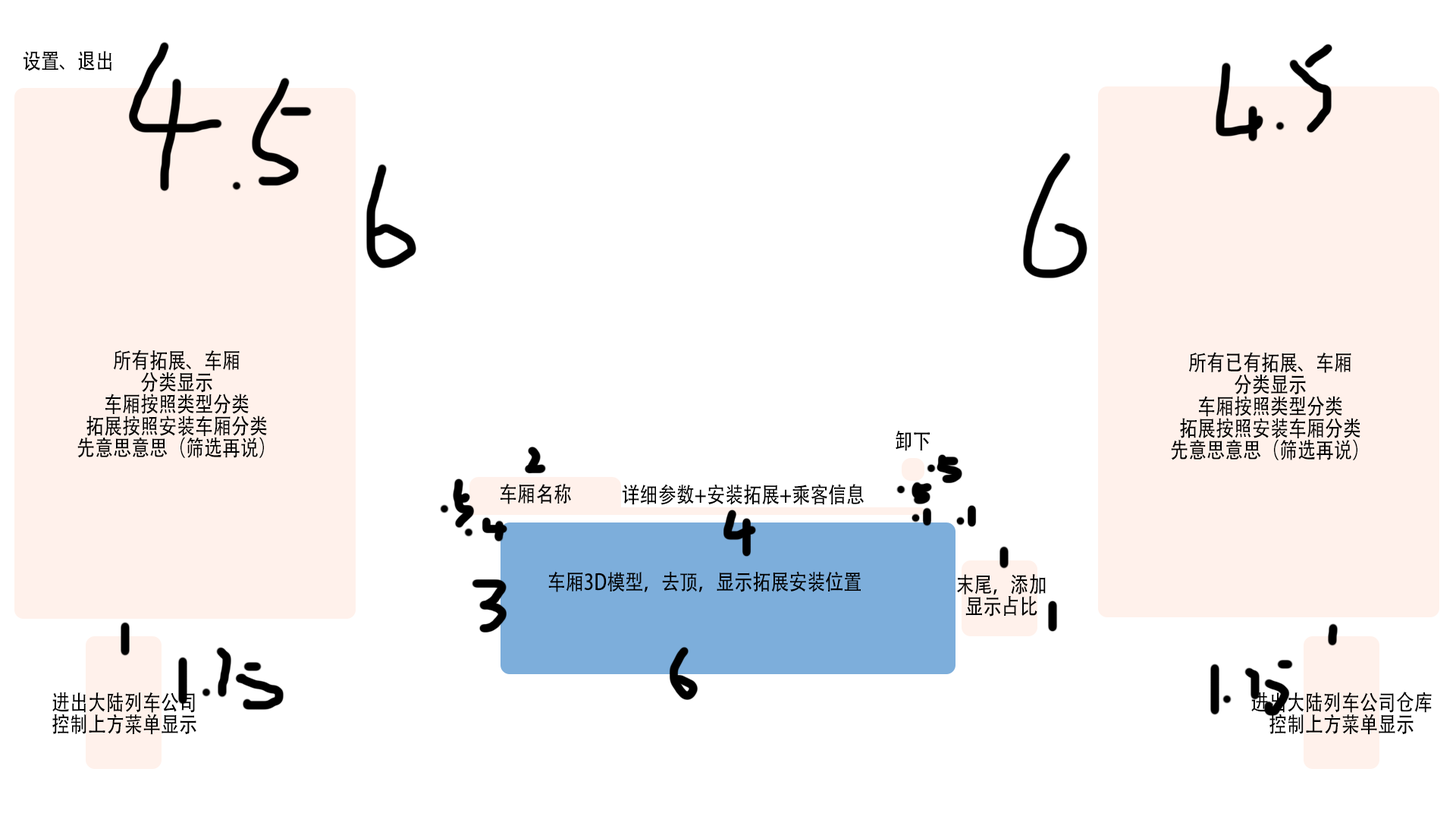
<style>
.page{position:relative;width:1456px;height:819px;background:#ffffff}
.page>*{position:absolute;margin:0}
.t1{font:21.8px "AdobeHeitiStd-Regular";color:#000000;scale:0.83 1}
</style>
<div class="page">
<p class="t1" style="left:24px;top:51px;width:88px;height:20px">设置、退出</p>
<p class="t1" style="left:77px;top:350px;width:190px;height:108px;text-align:center">所有拓展、车厢<br>分类显示<br>车厢按照类型分类<br>拓展按照安装车厢分类<br>先意思意思（筛选再说）</p>
<p class="t1" style="left:1171px;top:352px;width:189px;height:108px;text-align:center">所有已有拓展、车厢<br>分类显示<br>车厢按照类型分类<br>拓展按照安装车厢分类<br>先意思意思（筛选再说）</p>
<p class="t1" style="left:896px;top:430px;width:34px;height:21px">卸下</p>
<p class="t1" style="left:500px;top:483px;width:71px;height:21px">车厢名称</p>
<p class="t1" style="left:623px;top:484px;width:241px;height:21px">详细参数+安装拓展+乘客信息</p>
<p class="t1" style="left:548px;top:571px;width:313px;height:21px">车厢3D模型，去顶，显示拓展安装位置</p>
<p class="t1" style="left:956px;top:574px;width:90px;height:43px;text-align:center">末尾，添加<br>显示占比</p>
<p class="t1" style="left:52px;top:692px;width:144px;height:43px;text-align:center">进出大陆列车公司<br>控制上方菜单显示</p>
<p class="t1" style="left:1251px;top:692px;width:181px;height:43px;text-align:center">进出大陆列车公司仓库<br>控制上方菜单显示</p>
</div>
